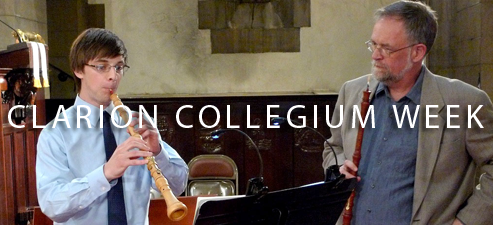
<style>
.page{position:relative;width:493px;height:225px}
.page>*{position:absolute;margin:0}
.t1{font:33.3px "MyriadPro-Regular";letter-spacing:0.13em;color:#ffffff}
</style>
<div class="page">
<p class="t1" style="left:8px;top:105px;width:476px;height:23px">CLARION COLLEGIUM WEEK</p>
</div>
